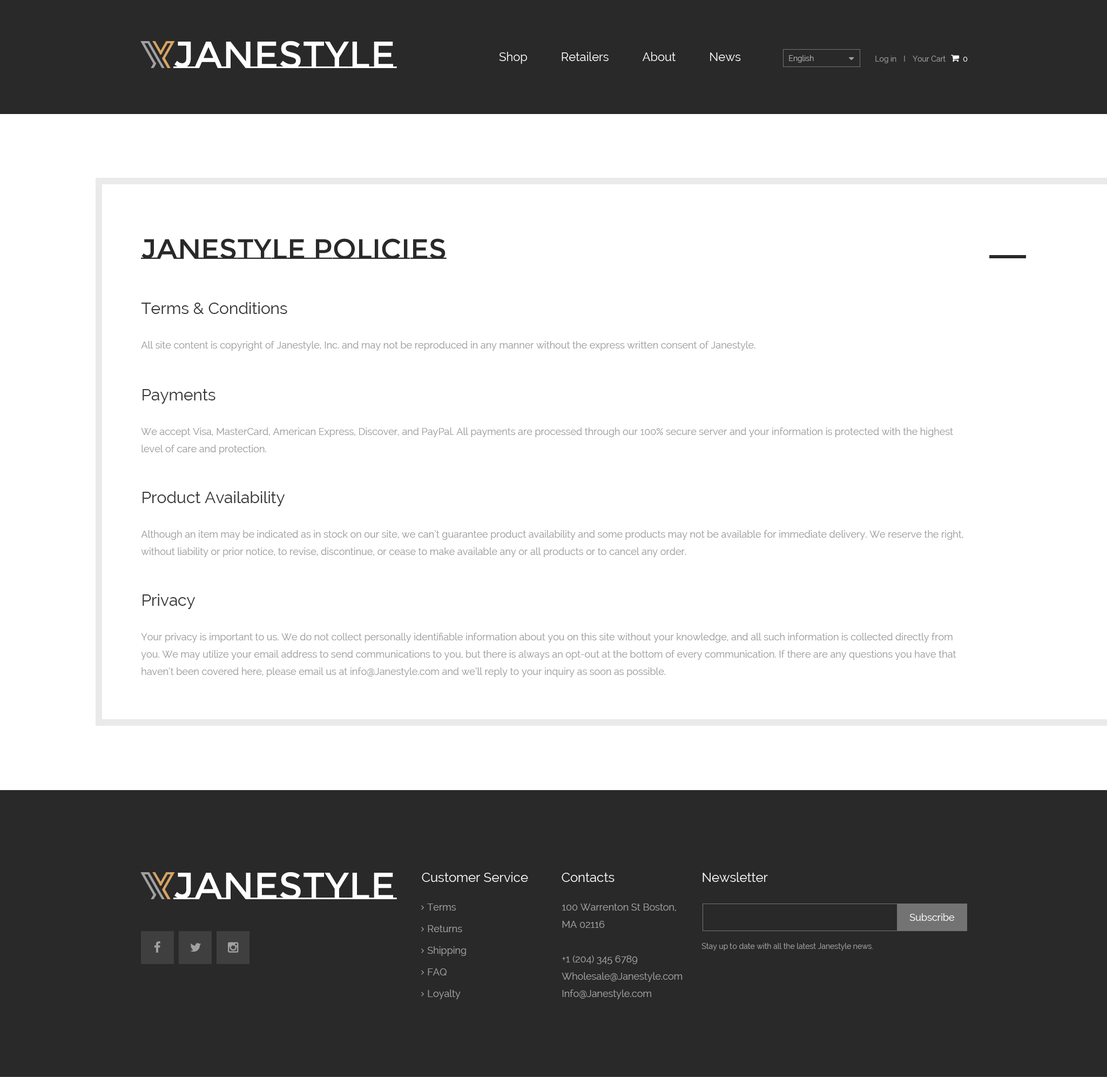
<style>
.page{position:relative;width:1107px;height:1077px;background:#ffffff}
.page>*{position:absolute;margin:0}
.t1{font:37.8px "MontserratSubrayada-Regular";color:#ffffff}
.t2{font:11.9px "Raleway";color:#ffffff}
.t3{font:7.6px "Raleway";color:#b3b3b3}
.t4{font:7.6px "Raleway";color:#a1a1a1}
.t5{font:7.6px "Raleway";color:#ffffff}
.t6{font:28.1px "MontserratSubrayada-Regular";color:#292929}
.t7{font:9.7px/17.3px "Raleway";color:#a1a1a1}
.t8{font:16.2px/17.3px "Raleway";color:#373737}
.t9{font:13px "Raleway";color:#ffffff}
.t10{font:9.7px/21.6px "Raleway";color:#a1a1a1}
.t11{font:9.7px "Raleway";color:#fffefe}
</style>
<div class="page">
<p class="t1" style="left:173px;top:41px;width:224px;height:27px">Janestyle</p>
<p class="t2" style="left:499px;top:52px;width:242px;height:12px">Shop           Retailers           About           News</p>
<p class="t3" style="left:789px;top:55px;width:25px;height:8px">English</p>
<p class="t4" style="left:876px;top:56px;width:21px;height:7px">Log in</p>
<p class="t4" style="left:913px;top:56px;width:33px;height:6px">Your Cart</p>
<p class="t5" style="left:963px;top:57px;width:5px;height:5px">0</p>
<p class="t6" style="left:141px;top:238px;width:306px;height:21px">Janestyle policies</p>
<p class="t7" style="left:141px;top:302px;width:615px;height:49px"><span class="t8">Terms &amp; Conditions<br></span><br>All site content is copyright of Janestyle, Inc. and may not be reproduced in any manner without the express written consent of Janestyle.</p>
<p class="t7" style="left:141px;top:389px;width:813px;height:65px"><span class="t8">Payments<br></span><br>We accept Visa, MasterCard, American Express, Discover, and PayPal. All payments are processed through our 100% secure server and your information is protected with the highest level of care and protection.</p>
<p class="t7" style="left:141px;top:491px;width:823px;height:66px"><span class="t8">Product Availability<br></span><br>Although an item may be indicated as in stock on our site, we can’t guarantee product availability and some products may not be available for immediate delivery. We reserve the right, without liability or prior notice, to revise, discontinue, or cease to make available any or all products or to cancel any order.</p>
<p class="t7" style="left:141px;top:594px;width:816px;height:83px"><span class="t8">Privacy<br></span><br>Your privacy is important to us. We do not collect personally identifiable information about you on this site without your knowledge, and all such information is collected directly from you. We may utilize your email address to send communications to you, but there is always an opt-out at the bottom of every communication. If there are any questions you have that haven’t been covered here, please email us at info@Janestyle.com and we’ll reply to your inquiry as soon as possible.</p>
<p class="t1" style="left:173px;top:872px;width:224px;height:27px">Janestyle</p>
<p class="t9" style="left:422px;top:872px;width:106px;height:10px">Customer Service</p>
<p class="t9" style="left:562px;top:872px;width:53px;height:10px">Contacts</p>
<p class="t9" style="left:703px;top:872px;width:65px;height:10px">Newsletter</p>
<p class="t10" style="left:427px;top:903px;width:39px;height:96px">Terms<br>Returns<br>Shipping<br>FAQ<br>Loyalty</p>
<p class="t7" style="left:562px;top:903px;width:121px;height:96px">100 Warrenton St Boston, <br>MA 02116<br><br>+1 (204) 345 6789<br>Wholesale@Janestyle.com<br>Info@Janestyle.com</p>
<p class="t11" style="left:910px;top:913px;width:45px;height:8px">Subscribe</p>
<p class="t4" style="left:702px;top:943px;width:172px;height:7px">Stay up to date with all the latest Janestyle news.</p>
</div>
